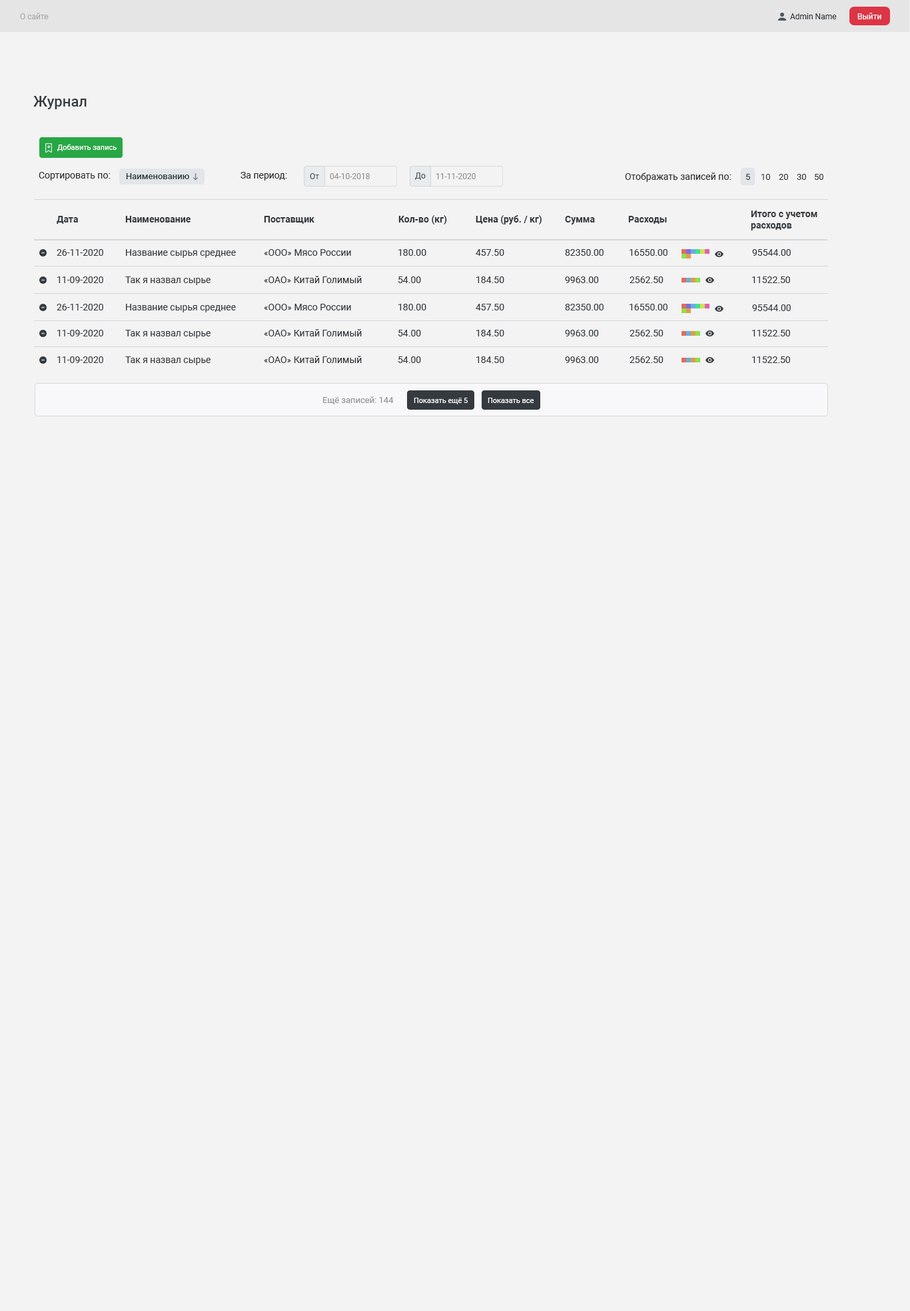
<style>
.page{position:relative;width:910px;height:1311px;background:#f3f3f3}
.page>*{position:absolute;margin:0}
.t1{font:8px "Roboto-Regular";color:#a9a9a9}
.t2{font:8px "Roboto-Regular";color:#343a40}
.t3{font:8px "Roboto-Regular";color:#fefefe}
.t4{font:14.7px "Roboto-Medium";color:#343a40}
.t5{font:7.3px "Roboto-Regular";color:#ffffff}
.t6{font:9.3px "Roboto-Regular";color:#303030}
.t7{font:8.7px "Roboto-Medium";color:#343a40}
.t8{font:8px "Roboto-Regular";color:#495057}
.t9{font:8px "Roboto-Regular";color:#949494}
.t10{font:8.7px "Roboto-Regular";color:#343a40}
.t11{font:9.3px "Roboto-Bold";color:#343a40}
.t12{font:9.3px "Roboto-Regular";color:#343a40}
.t13{font:8.7px "Roboto-Regular";color:#939393}
.t14{font:7.3px "Roboto-Regular";color:#fefefe}
</style>
<div class="page">
<p class="t1" style="left:20px;top:13px;width:29px;height:6px">О сайте</p>
<p class="t2" style="left:790px;top:13px;width:47px;height:6px">Admin Name</p>
<p class="t3" style="left:857px;top:13px;width:24px;height:6px">Выйти</p>
<p class="t4" style="left:33px;top:96px;width:54px;height:13px">Журнал</p>
<p class="t5" style="left:57px;top:144px;width:60px;height:7px">Добавить запись</p>
<p class="t6" style="left:39px;top:172px;width:72px;height:8px">Сортировать по:</p>
<p class="t7" style="left:126px;top:173px;width:63px;height:6px">Наименованию</p>
<p class="t6" style="left:240px;top:172px;width:47px;height:8px">За период:</p>
<p class="t8" style="left:310px;top:173px;width:9px;height:6px">От</p>
<p class="t9" style="left:330px;top:173px;width:40px;height:6px">04-10-2018</p>
<p class="t8" style="left:415px;top:172px;width:11px;height:8px">До</p>
<p class="t9" style="left:436px;top:173px;width:40px;height:6px">11-11-2020</p>
<p class="t6" style="left:625px;top:172px;width:106px;height:10px">Отображать записей по:</p>
<p class="t10" style="left:745px;top:174px;width:5px;height:6px">5</p>
<p class="t10" style="left:761px;top:174px;width:9px;height:6px">10</p>
<p class="t10" style="left:779px;top:174px;width:9px;height:6px">20</p>
<p class="t10" style="left:797px;top:174px;width:9px;height:6px">30</p>
<p class="t10" style="left:814px;top:174px;width:9px;height:6px">50</p>
<p class="t11" style="left:57px;top:216px;width:21px;height:8px">Дата</p>
<p class="t11" style="left:125px;top:216px;width:66px;height:6px">Наименование</p>
<p class="t11" style="left:264px;top:216px;width:50px;height:8px">Поставщик</p>
<p class="t11" style="left:398px;top:215px;width:49px;height:9px">Кол-во (кг)</p>
<p class="t11" style="left:476px;top:215px;width:65px;height:9px">Цена (руб. / кг)</p>
<p class="t11" style="left:565px;top:216px;width:30px;height:8px">Сумма</p>
<p class="t11" style="left:628px;top:216px;width:39px;height:8px">Расходы</p>
<p class="t11" style="left:751px;top:210px;width:66px;height:20px">Итого с учетом<br>расходов</p>
<p class="t12" style="left:57px;top:249px;width:46px;height:7px">26-11-2020</p>
<p class="t12" style="left:126px;top:249px;width:110px;height:9px">Название сырья среднее</p>
<p class="t12" style="left:264px;top:249px;width:87px;height:7px">«ООО» Мясо России</p>
<p class="t12" style="left:398px;top:249px;width:28px;height:7px">180.00</p>
<p class="t12" style="left:476px;top:249px;width:28px;height:7px">457.50</p>
<p class="t12" style="left:565px;top:249px;width:38px;height:7px">82350.00</p>
<p class="t12" style="left:629px;top:249px;width:38px;height:7px">16550.00</p>
<p class="t12" style="left:752px;top:249px;width:39px;height:7px">95544.00</p>
<p class="t12" style="left:57px;top:276px;width:46px;height:7px">11-09-2020</p>
<p class="t12" style="left:125px;top:276px;width:85px;height:9px">Так я назвал сырье</p>
<p class="t12" style="left:264px;top:276px;width:98px;height:7px">«ОАО» Китай Голимый</p>
<p class="t12" style="left:398px;top:276px;width:23px;height:7px">54.00</p>
<p class="t12" style="left:476px;top:276px;width:28px;height:7px">184.50</p>
<p class="t12" style="left:565px;top:276px;width:34px;height:7px">9963.00</p>
<p class="t12" style="left:629px;top:276px;width:34px;height:7px">2562.50</p>
<p class="t12" style="left:752px;top:276px;width:38px;height:7px">11522.50</p>
<p class="t12" style="left:57px;top:304px;width:46px;height:6px">26-11-2020</p>
<p class="t12" style="left:126px;top:304px;width:110px;height:8px">Название сырья среднее</p>
<p class="t12" style="left:264px;top:304px;width:87px;height:6px">«ООО» Мясо России</p>
<p class="t12" style="left:398px;top:304px;width:28px;height:6px">180.00</p>
<p class="t12" style="left:476px;top:304px;width:28px;height:6px">457.50</p>
<p class="t12" style="left:565px;top:304px;width:38px;height:6px">82350.00</p>
<p class="t12" style="left:629px;top:304px;width:38px;height:6px">16550.00</p>
<p class="t12" style="left:752px;top:304px;width:39px;height:7px">95544.00</p>
<p class="t12" style="left:57px;top:330px;width:46px;height:6px">11-09-2020</p>
<p class="t12" style="left:125px;top:330px;width:85px;height:8px">Так я назвал сырье</p>
<p class="t12" style="left:264px;top:329px;width:98px;height:7px">«ОАО» Китай Голимый</p>
<p class="t12" style="left:398px;top:330px;width:23px;height:6px">54.00</p>
<p class="t12" style="left:476px;top:330px;width:28px;height:6px">184.50</p>
<p class="t12" style="left:565px;top:330px;width:34px;height:6px">9963.00</p>
<p class="t12" style="left:629px;top:330px;width:34px;height:6px">2562.50</p>
<p class="t12" style="left:752px;top:330px;width:38px;height:6px">11522.50</p>
<p class="t12" style="left:57px;top:356px;width:46px;height:7px">11-09-2020</p>
<p class="t12" style="left:125px;top:356px;width:85px;height:9px">Так я назвал сырье</p>
<p class="t12" style="left:264px;top:356px;width:98px;height:7px">«ОАО» Китай Голимый</p>
<p class="t12" style="left:398px;top:356px;width:23px;height:7px">54.00</p>
<p class="t12" style="left:476px;top:356px;width:28px;height:7px">184.50</p>
<p class="t12" style="left:565px;top:356px;width:34px;height:7px">9963.00</p>
<p class="t12" style="left:629px;top:356px;width:34px;height:7px">2562.50</p>
<p class="t12" style="left:752px;top:356px;width:38px;height:7px">11522.50</p>
<p class="t13" style="left:323px;top:396px;width:71px;height:8px">Ещё записей: 144</p>
<p class="t14" style="left:414px;top:398px;width:54px;height:6px">Показать ещё 5</p>
<p class="t5" style="left:488px;top:398px;width:46px;height:5px">Показать все</p>
</div>
